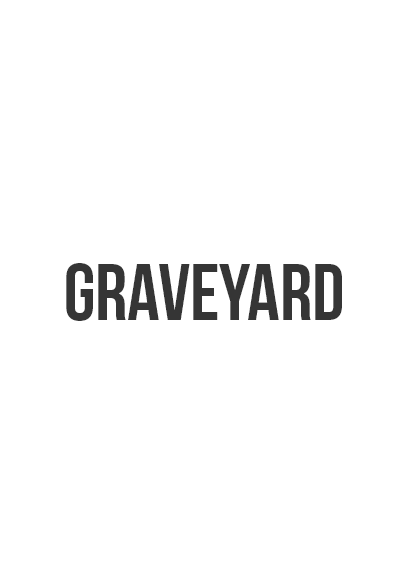
<style>
.page{position:relative;width:408px;height:585px;background:#ffffff}
.page>*{position:absolute;margin:0}
.t1{font:80px "BebasNeue";color:#353535}
</style>
<div class="page">
<p class="t1" style="left:66px;top:263px;width:276px;height:58px">graveyard</p>
</div>
